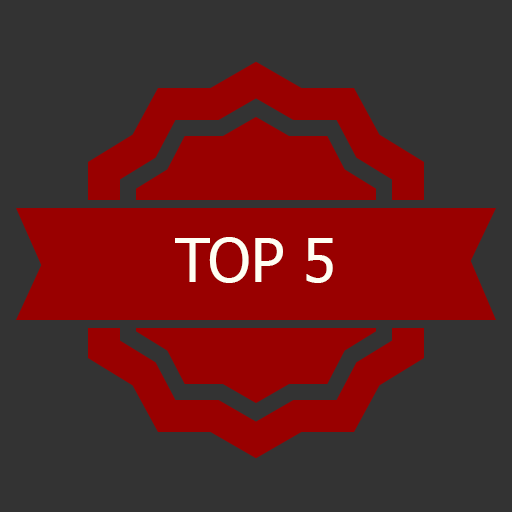
<style>
.page{position:relative;width:512px;height:512px;background:#333333}
.page>*{position:absolute;margin:0}
.t1{font:60px "Tahoma";color:#fffff3}
</style>
<div class="page">
<p class="t1" style="left:175px;top:237px;width:158px;height:46px">TOP 5</p>
</div>
